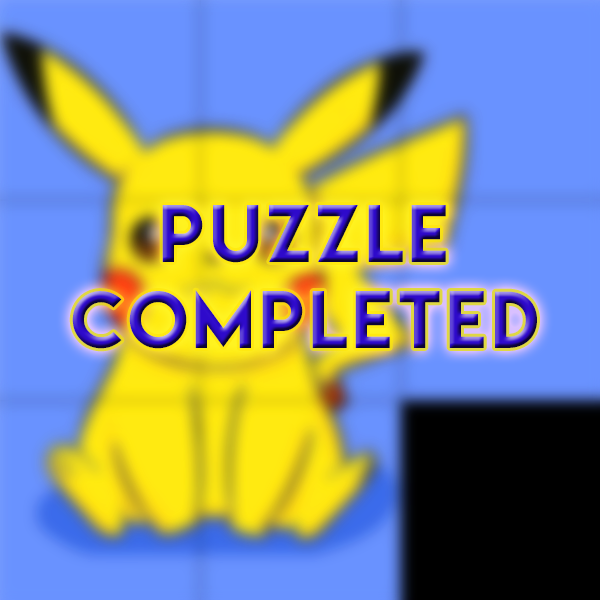
<style>
.page{position:relative;width:600px;height:600px;background:#6992ff}
.page>*{position:absolute;margin:0}
.t1{font:72px "LemonMilk";letter-spacing:0.075em}
</style>
<div class="page">
<p class="t1" style="left:72px;top:205px;width:465px;height:144px;text-align:center">puzzle<br>completed</p>
</div>
